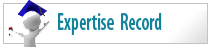
<style>
.page{position:relative;width:211px;height:47px;background:#ffffff}
.page>*{position:absolute;margin:0}
.t1{font:24px "MyriadPro-SemiboldCond";color:#11839a;scale:0.78 1}
</style>
<div class="page">
<p class="t1" style="left:58px;top:13px;width:104px;height:22px">Expertise  Record</p>
</div>
